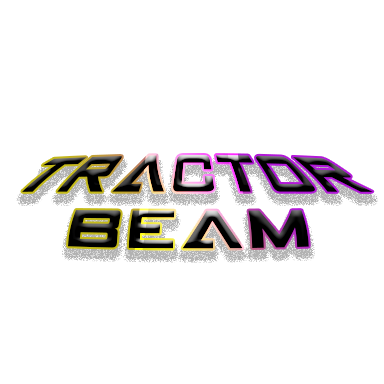
<style>
.page{position:relative;width:384px;height:384px;background:#ffffff}
.page>*{position:absolute;margin:0}
.t1{font:41.7px "GAMECUBENDualSet";color:#000000}
</style>
<div class="page">
<p class="t1" style="left:22px;top:155px;width:351px;height:94px;text-align:center">TRACTOR<br>BEAM</p>
</div>
